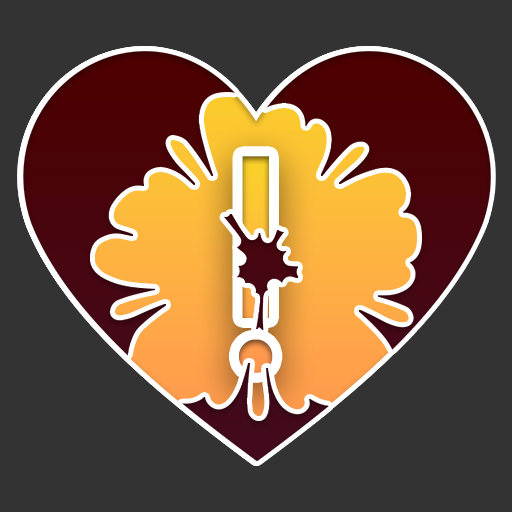
<style>
.page{position:relative;width:512px;height:512px;background:#333333}
.page>*{position:absolute;margin:0}
.t1{font:300px "FuturaBT-MediumCondensed"}
</style>
<div class="page">
<p class="t1" style="left:239px;top:156px;width:34px;height:217px">!</p>
</div>
